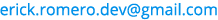
<style>
.page{position:relative;width:218px;height:20px;background:#ffffff}
.page>*{position:absolute;margin:0}
.t1{font:16px "OpenSans";color:#0091ea}
</style>
<div class="page">
<p class="t1" style="left:0px;top:3px;width:217px;height:17px">erick.romero.dev@gmail.com</p>
</div>
